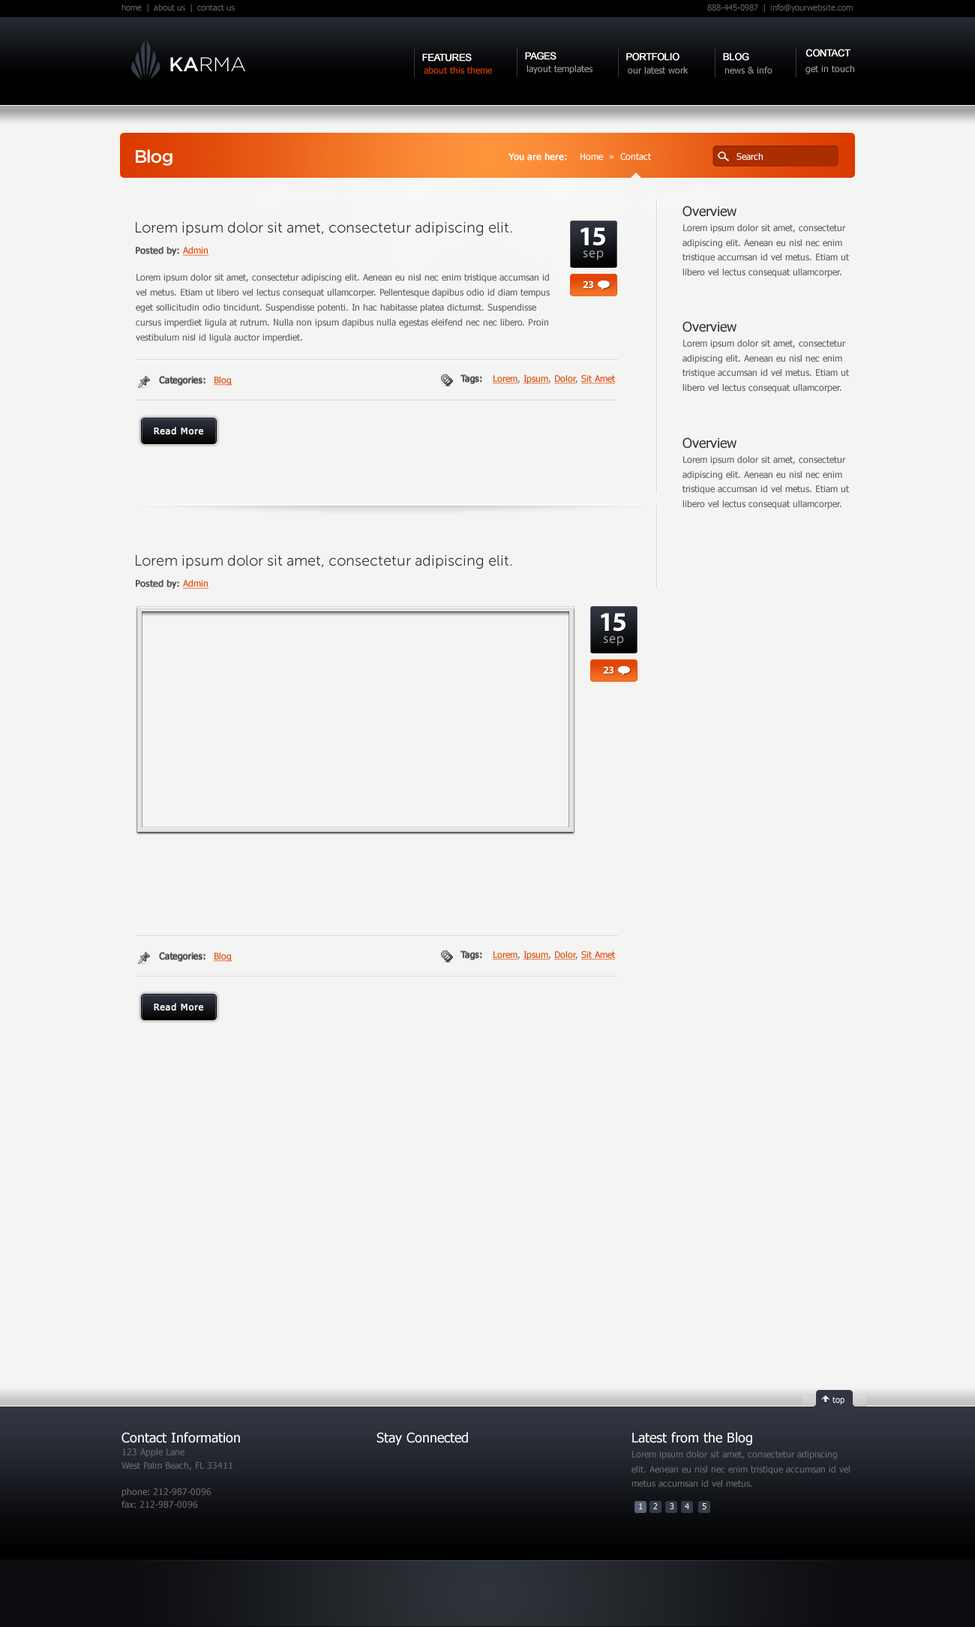
<style>
.page{position:relative;width:975px;height:1627px;background:#f4f4f2}
.page>*{position:absolute;margin:0}
.t1{font:8.2px "Tahoma";color:#666666}
.t2{font:9.8px "ArialMT";letter-spacing:-0.05em;color:#ffffff;font-weight:bold}
.t3{font:19.7px "Gotham-Light";color:#ffffff}
.t4{font:19.7px "Gotham-Medium";color:#ffffff}
.t5{font:9px "Tahoma";color:#999999}
.t6{font:9px "Tahoma";color:#dc3b00}
.t7{font:18px "Gotham-Medium";letter-spacing:-0.05em;color:#ffffff}
.t8{font:9px "Tahoma";color:#ffffff}
.t9{font:9px "Tahoma";color:#ffffff;font-weight:bold}
.t10{font:9px/14.9px "Tahoma";color:#666666}
.t11{font:13.5px/22.4px "Tahoma";color:#363636}
.t12{font:15px "MuseoSans-300";color:#363636}
.t13{font:27px "MyriadPro-Bold";letter-spacing:-0.05em;color:#ffffff}
.t14{font:9px "Tahoma";color:#4c4c4c;font-weight:bold}
.t15{font:9px "Tahoma";color:#e14a0a;text-decoration:underline}
.t16{font:13.5px "MyriadPro-Regular";letter-spacing:0.05em;color:#a3a3a4}
.t17{font:10.5px "MyriadPro-Bold";letter-spacing:-0.05em;color:#ffffff}
.t18{font:9px "Tahoma";letter-spacing:-0.025em;color:#4c4c4c;font-weight:bold}
.t19{font:9px "Tahoma";color:#000000}
.t20{font:9px "Tahoma";color:#666666}
.t21{font:8.2px "Tahoma";color:#ffffff}
.t22{font:9px/13.1px "Tahoma";color:#666666}
.t23{font:13.5px/19.7px "Tahoma";color:#ffffff}
.t24{font:13.5px "Tahoma";color:#ffffff}
</style>
<div class="page">
<p class="t1" style="left:122px;top:4px;width:113px;height:8px">home  |  about us  |  contact us</p>
<p class="t1" style="left:707px;top:4px;width:146px;height:9px">888-445-0987  |  info@yourwebsite.com</p>
<p class="t2" style="left:422px;top:53px;width:50px;height:9px">FEATURES</p>
<p class="t2" style="left:525px;top:52px;width:31px;height:8px">PAGES</p>
<p class="t2" style="left:626px;top:52px;width:54px;height:9px">PORTFOLIO</p>
<p class="t2" style="left:723px;top:52px;width:26px;height:9px">BLOG</p>
<p class="t2" style="left:806px;top:49px;width:44px;height:8px">CONTACT</p>
<p class="t3" style="left:170px;top:57px;width:75px;height:14px"><span class="t4">KA</span>RMA</p>
<p class="t5" style="left:526px;top:65px;width:66px;height:9px">layout templates</p>
<p class="t5" style="left:806px;top:65px;width:48px;height:9px">get in touch</p>
<p class="t6" style="left:424px;top:67px;width:68px;height:7px">about this theme</p>
<p class="t5" style="left:628px;top:67px;width:60px;height:7px">our latest work</p>
<p class="t5" style="left:724px;top:67px;width:48px;height:7px">news &amp; info</p>
<p class="t7" style="left:136px;top:149px;width:36px;height:17px">Blog</p>
<p class="t8" style="left:508px;top:153px;width:143px;height:7px"><span class="t9">You are here: </span>   Home  »  Contact</p>
<p class="t8" style="left:736px;top:153px;width:27px;height:7px">Search</p>
<p class="t10" style="left:682px;top:206px;width:167px;height:72px"><span class="t11">Overview</span><br>Lorem ipsum dolor sit amet, consectetur adipiscing elit. Aenean eu nisl nec enim tristique accumsan id vel metus. Etiam ut libero vel lectus consequat ullamcorper.</p>
<p class="t12" style="left:136px;top:222px;width:376px;height:14px">Lorem ipsum dolor sit amet, consectetur adipiscing elit.</p>
<p class="t13" style="left:580px;top:227px;width:25px;height:19px">15</p>
<p class="t14" style="left:136px;top:247px;width:73px;height:9px">Posted by: <span class="t15">Admin</span></p>
<p class="t16" style="left:583px;top:250px;width:21px;height:10px">sep</p>
<p class="t10" style="left:136px;top:274px;width:414px;height:69px">Lorem ipsum dolor sit amet, consectetur adipiscing elit. Aenean eu nisl nec enim tristique accumsan id vel metus. Etiam ut libero vel lectus consequat ullamcorper. Pellentesque dapibus odio id diam tempus eget sollicitudin odio tincidunt. Suspendisse potenti. In hac habitasse platea dictumst. Suspendisse cursus imperdiet ligula at rutrum. Nulla non ipsum dapibus nulla egestas eleifend nec nec libero. Proin vestibulum nisl id ligula auctor imperdiet.</p>
<p class="t17" style="left:583px;top:280px;width:11px;height:8px">23</p>
<p class="t10" style="left:682px;top:321px;width:167px;height:72px"><span class="t11">Overview</span><br>Lorem ipsum dolor sit amet, consectetur adipiscing elit. Aenean eu nisl nec enim tristique accumsan id vel metus. Etiam ut libero vel lectus consequat ullamcorper.</p>
<p class="t18" style="left:159px;top:376px;width:47px;height:10px">Categories:</p>
<p class="t15" style="left:214px;top:376px;width:18px;height:10px"><span class="t19"> </span>Blog</p>
<p class="t18" style="left:460px;top:375px;width:22px;height:9px">Tags:</p>
<p class="t15" style="left:493px;top:375px;width:123px;height:9px"><span class="t20"> </span>Lorem<span class="t20">, </span>Ipsum<span class="t20">, </span>Dolor<span class="t20">, </span>Sit Amet</p>
<p class="t10" style="left:682px;top:437px;width:167px;height:72px"><span class="t11">Overview</span><br>Lorem ipsum dolor sit amet, consectetur adipiscing elit. Aenean eu nisl nec enim tristique accumsan id vel metus. Etiam ut libero vel lectus consequat ullamcorper.</p>
<p class="t12" style="left:136px;top:555px;width:376px;height:14px">Lorem ipsum dolor sit amet, consectetur adipiscing elit.</p>
<p class="t14" style="left:136px;top:580px;width:73px;height:9px">Posted by: <span class="t15">Admin</span></p>
<p class="t13" style="left:601px;top:613px;width:25px;height:19px">15</p>
<p class="t16" style="left:603px;top:636px;width:21px;height:10px">sep</p>
<p class="t17" style="left:603px;top:666px;width:11px;height:8px">23</p>
<p class="t18" style="left:159px;top:952px;width:47px;height:10px">Categories:</p>
<p class="t15" style="left:214px;top:952px;width:18px;height:10px"><span class="t19"> </span>Blog</p>
<p class="t18" style="left:460px;top:951px;width:22px;height:9px">Tags:</p>
<p class="t15" style="left:493px;top:951px;width:123px;height:9px"><span class="t20"> </span>Lorem<span class="t20">, </span>Ipsum<span class="t20">, </span>Dolor<span class="t20">, </span>Sit Amet</p>
<p class="t21" style="left:832px;top:1396px;width:12px;height:9px">top</p>
<p class="t22" style="left:122px;top:1432px;width:118px;height:76px"><span class="t23">Contact Information</span><br>123 Apple Lane<br>West Palm Beach, FL 33411<br><br>phone: 212-987-0096<br>fax: 212-987-0096</p>
<p class="t24" style="left:376px;top:1432px;width:92px;height:13px">Stay Connected</p>
<p class="t10" style="left:632px;top:1432px;width:218px;height:55px"><span class="t23">Latest from the Blog<br></span>Lorem ipsum dolor sit amet, consectetur adipiscing elit. Aenean eu nisl nec enim tristique accumsan id vel metus accumsan id vel metus.</p>
<p class="t21" style="left:639px;top:1503px;width:4px;height:6px">1</p>
<p class="t21" style="left:653px;top:1502px;width:5px;height:7px">2</p>
<p class="t21" style="left:670px;top:1502px;width:4px;height:8px">3</p>
<p class="t21" style="left:685px;top:1503px;width:4px;height:6px">4</p>
<p class="t21" style="left:702px;top:1503px;width:4px;height:7px">5</p>
</div>
